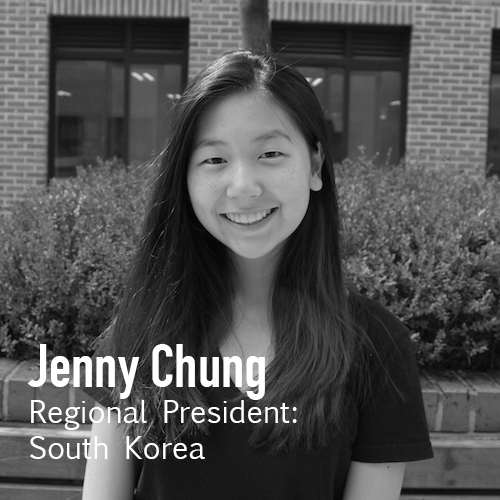
<style>
.page{position:relative;width:500px;height:500px}
.page>*{position:absolute;margin:0}
.t1{font:30px "EuphemiaUCAS";color:#ffffff}
.t2{font:60px "DINCondensed-Bold";color:#ffffff}
</style>
<div class="page">
<p class="t1" style="left:27px;top:344px;width:270px;height:115px"><span class="t2">Jenny Chung<br></span>Regional President:<br>South Korea</p>
</div>
